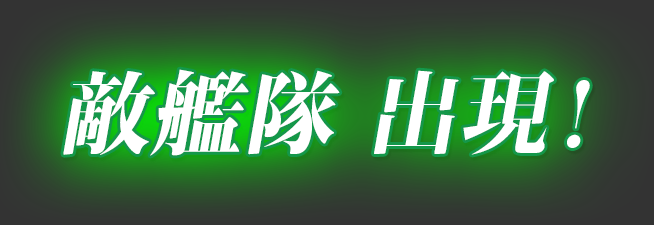
<style>
.page{position:relative;width:654px;height:225px}
.page>*{position:absolute;margin:0}
.t1{font:90px "KochoStd-Heavy";letter-spacing:0.02em;color:#ffffff;font-style:italic}
</style>
<div class="page">
<p class="t1" style="left:63px;top:69px;width:527px;height:87px">敵艦隊 出現！</p>
</div>
